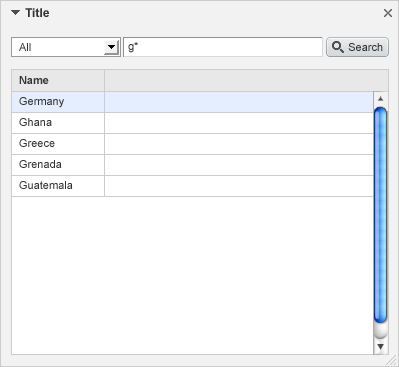
<style>
.page{position:relative;width:399px;height:367px;background:#ffffff}
.page>*{position:absolute;margin:0}
.t1{font:12px "Arial-BoldMT";color:#333333}
.t2{font:11px "ArialMT";color:#333333}
.t3{font:11px/21px "ArialMT";color:#333333}
.t4{font:11px/21px "Arial-BoldMT";color:#333333}
</style>
<div class="page">
<p class="t1" style="left:25px;top:8px;width:24px;height:9px">Title</p>
<p class="t2" style="left:19px;top:43px;width:12px;height:8px">All</p>
<p class="t2" style="left:128px;top:42px;width:10px;height:11px">g*</p>
<p class="t2" style="left:348px;top:43px;width:35px;height:8px">Search</p>
<p class="t3" style="left:19px;top:76px;width:54px;height:113px"><span class="t4">Name<br></span>Germany<br>Ghana<br>Greece<br>Grenada<br>Guatemala</p>
</div>
